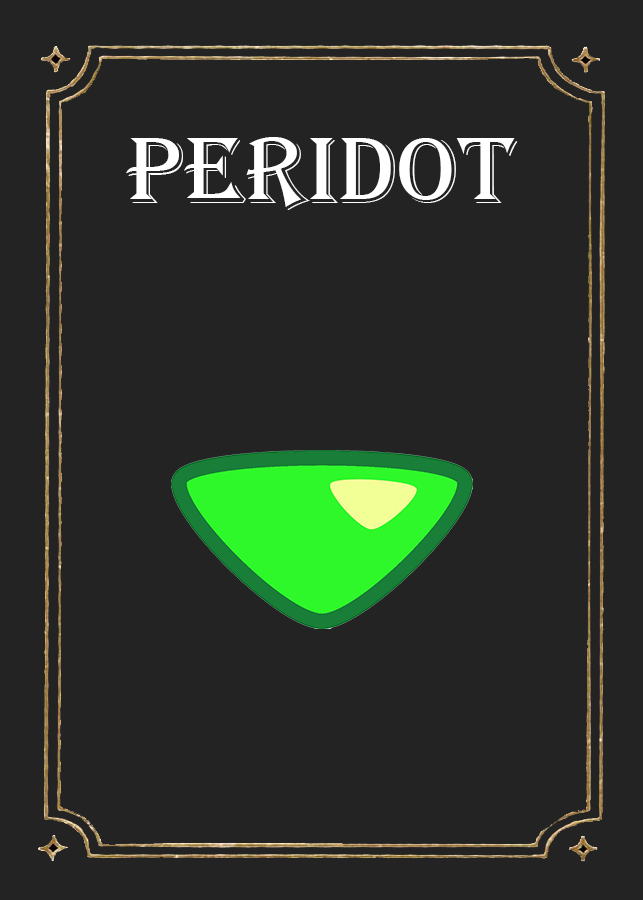
<style>
.page{position:relative;width:643px;height:900px;background:#232323}
.page>*{position:absolute;margin:0}
.t1{font:98.3px "Algerian";color:#ffffff}
</style>
<div class="page">
<p class="t1" style="left:126px;top:137px;width:392px;height:73px">PEridot</p>
</div>
